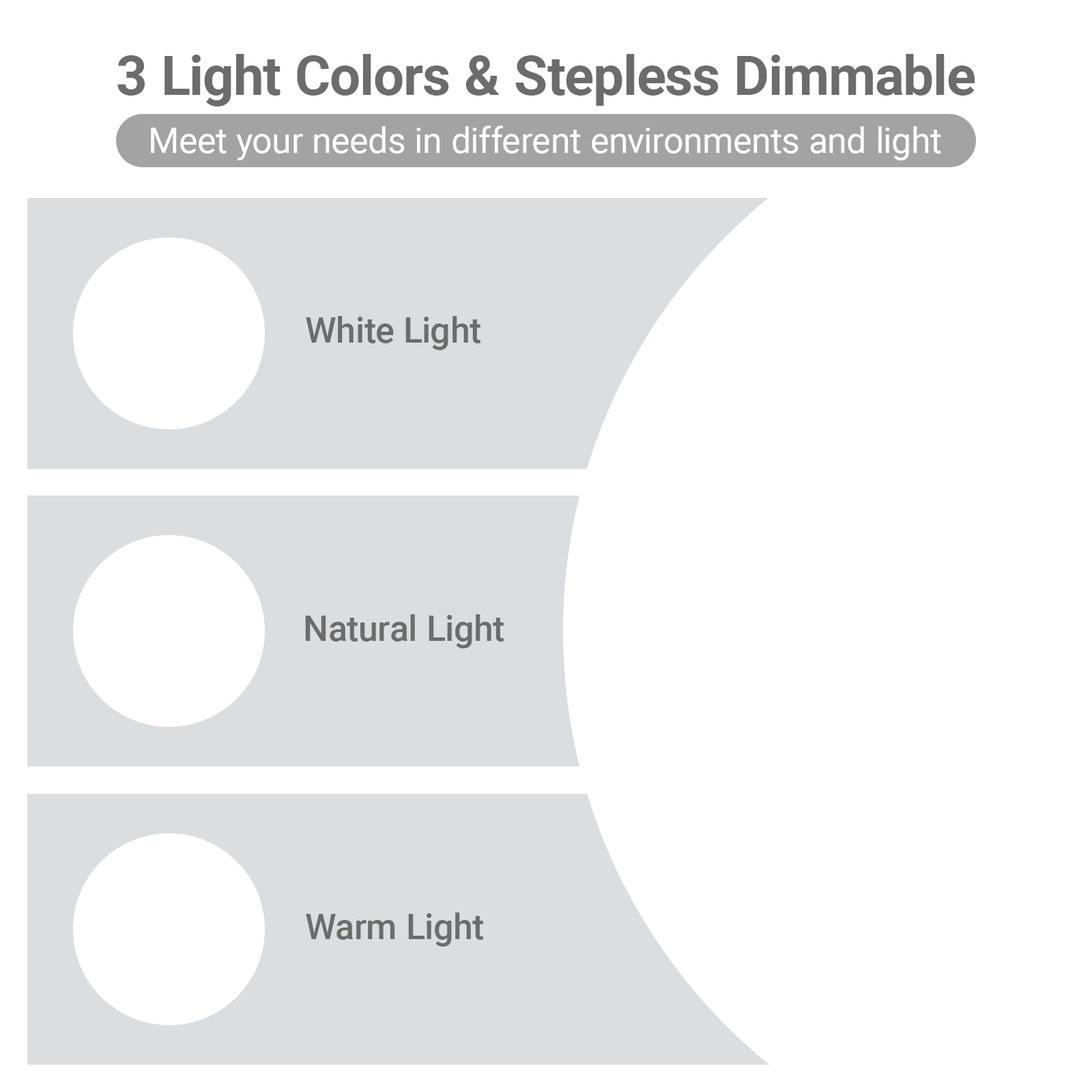
<style>
.page{position:relative;width:1092px;height:1092px;background:#ffffff}
.page>*{position:absolute;margin:0}
.t1{font:54.6px "Roboto-Bold";color:#6c6c6c}
.t2{font:35.5px "Roboto-Regular";color:#ffffff}
.t3{font:35.5px "Roboto-Medium";color:#6c6c6c}
</style>
<div class="page">
<p class="t1" style="left:117px;top:54px;width:858px;height:52px">3 Light Colors &amp; Stepless Dimmable</p>
<p class="t2" style="left:151px;top:126px;width:790px;height:34px">Meet your needs in different environments and light</p>
<p class="t3" style="left:306px;top:316px;width:174px;height:34px">White Light</p>
<p class="t3" style="left:305px;top:614px;width:199px;height:34px">Natural Light</p>
<p class="t3" style="left:306px;top:912px;width:177px;height:35px">Warm Light</p>
</div>
